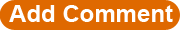
<style>
.page{position:relative;width:180px;height:30px;background:#df6900}
.page>*{position:absolute;margin:0}
.t1{font:24px "Arial-BoldMT";color:#ffffff}
</style>
<div class="page">
<p class="t1" style="left:9px;top:5px;width:164px;height:17px">Add Comment</p>
</div>
